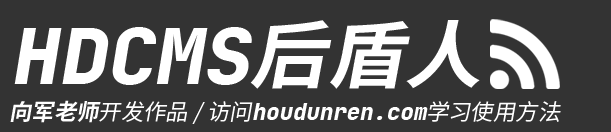
<style>
.page{position:relative;width:611px;height:132px;background:#333333}
.page>*{position:absolute;margin:0}
.t1{font:76px "JetBrainsMono-ExtraBoldItalic";color:#ffffff;scale:1.05 1}
.t2{font:73.4px "SourceHanSansSC-Bold";color:#ffffff;font-style:italic;scale:1.05 1}
.t3{font:22.4px "JetBrainsMono-ExtraBold";color:#ffffff;font-style:italic}
.t4{font:22.4px "SourceHanSansSC-Bold";color:#ffffff;font-style:italic}
.t5{font:22.4px "SourceHanSansSC-Normal";color:#ffffff;font-style:italic}
</style>
<div class="page">
<p class="t1" style="left:14px;top:27px;width:238px;height:58px">HDCMS</p>
<p class="t2" style="left:250px;top:20px;width:230px;height:69px">后盾人</p>
<p class="t3" style="left:10px;top:100px;width:551px;height:24px"><span class="t4">向军老师</span><span class="t5">开发作品 / 访问</span>houdunren.com<span class="t5">学习使用方法</span></p>
</div>
